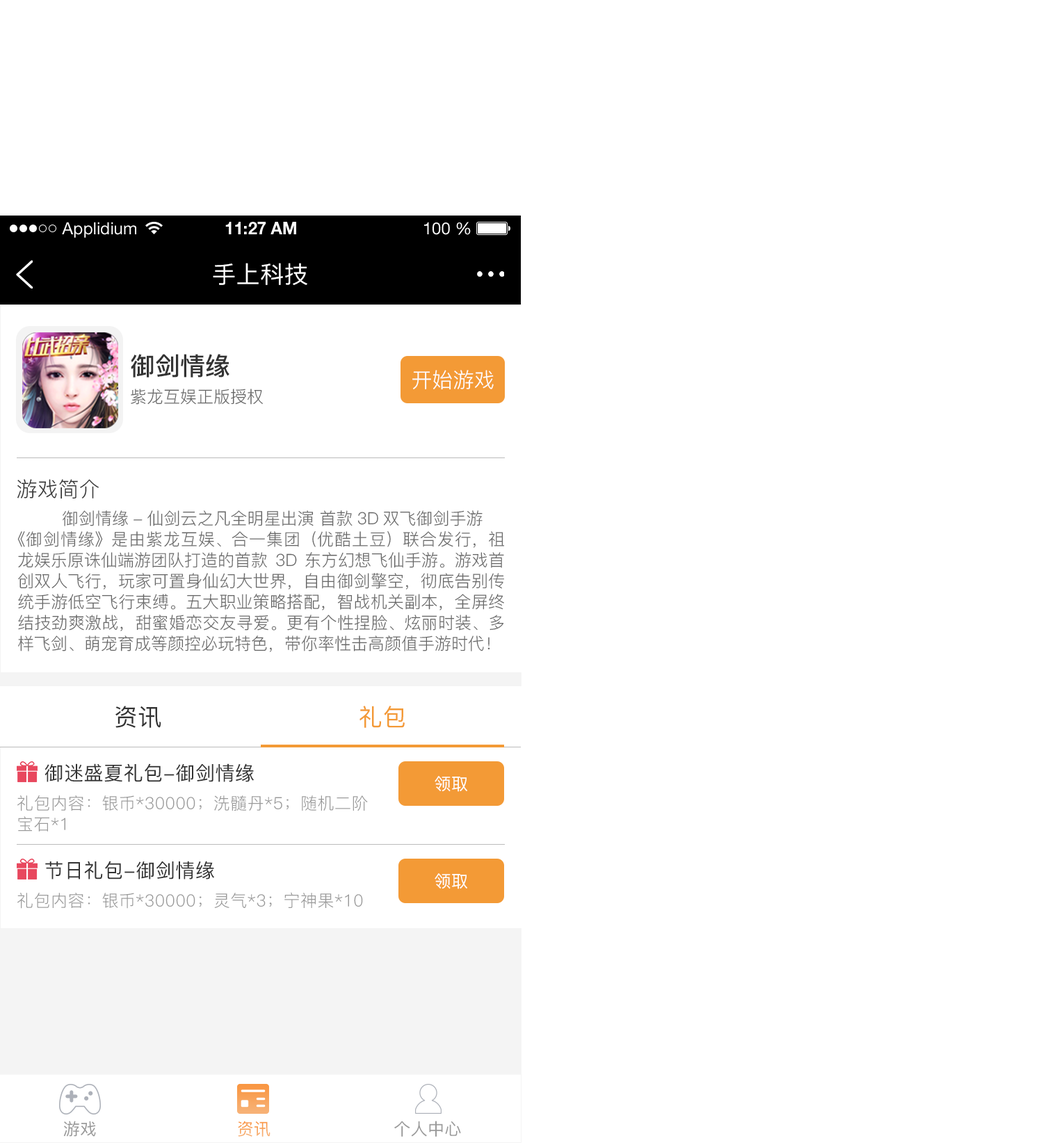
<style>
.page{position:relative;width:1043px;height:1143px;background:#ffffff}
.page>*{position:absolute;margin:0}
.t1{font:16.7px "HelveticaNeueLTStd-Roman";color:#ffffff}
.t2{font:16.7px "HelveticaNeueLTStd-Bd";color:#ffffff}
.t3{font:23.6px "PingFang-SC-Medium";letter-spacing:0.02em;color:#ffffff}
.t4{font:25px "PingFang-SC-Bold";color:#333333}
.t5{font:20.9px "PingFang-SC-Regular";color:#fefefe}
.t6{font:16.7px "PingFang-SC-Regular";color:#666666}
.t7{font:20.9px "PingFang-SC-Regular";color:#333333}
.t8{font:16.7px/20.9px "PingFang-SC-Regular";color:#666666}
.t9{font:23.6px "PingFang-SC-Medium";letter-spacing:0.02em;color:#333333}
.t10{font:23.6px "PingFang-SC-Medium";letter-spacing:0.02em;color:#f39a36}
.t11{font:19.5px "PingFang-SC-Medium";letter-spacing:0.02em;color:#333333}
.t12{font:16.7px "PingFang-SC-Medium";letter-spacing:0.02em;color:#fffefe}
.t13{font:16.7px/20.9px "PingFang-SC-Regular";letter-spacing:0.02em;color:#999999}
.t14{font:16.7px "PingFang-SC-Regular";letter-spacing:0.02em;color:#999999}
.t15{font:16.7px "PingFang-SC-Medium";letter-spacing:0.02em;color:#999999}
.t16{font:16.7px "PingFang-SC-Medium";letter-spacing:0.02em;color:#f8a45c}
</style>
<div class="page">
<p class="t1" style="left:62px;top:222px;width:74px;height:16px">Applidium</p>
<p class="t2" style="left:225px;top:222px;width:71px;height:12px">11:27 AM</p>
<p class="t1" style="left:424px;top:222px;width:47px;height:13px">100 %</p>
<p class="t3" style="left:213px;top:263px;width:94px;height:22px">手上科技</p>
<p class="t4" style="left:131px;top:354px;width:98px;height:24px">御剑情缘</p>
<p class="t5" style="left:412px;top:370px;width:82px;height:20px">开始游戏</p>
<p class="t6" style="left:131px;top:389px;width:132px;height:16px">紫龙互娱正版授权</p>
<p class="t7" style="left:17px;top:479px;width:82px;height:20px">游戏简介</p>
<p class="t8" style="left:17px;top:510px;width:487px;height:142px">御剑情缘-仙剑云之凡全明星出演 首款3D双飞御剑手游<br>《御剑情缘》是由紫龙互娱、合一集团（优酷土豆）联合发行，祖龙娱乐原诛仙端游团队打造的首款3D东方幻想飞仙手游。游戏首创双人飞行，玩家可置身仙幻大世界，自由御剑擎空，彻底告别传统手游低空飞行束缚。五大职业策略搭配，智战机关副本，全屏终结技劲爽激战，甜蜜婚恋交友寻爱。更有个性捏脸、炫丽时装、多样飞剑、萌宠育成等颜控必玩特色，带你率性击高颜值手游时代！</p>
<p class="t9" style="left:115px;top:706px;width:46px;height:22px">资讯</p>
<p class="t10" style="left:360px;top:706px;width:45px;height:22px">礼包</p>
<p class="t11" style="left:45px;top:764px;width:209px;height:18px">御迷盛夏礼包-御剑情缘</p>
<p class="t12" style="left:435px;top:776px;width:32px;height:16px">领取</p>
<p class="t13" style="left:17px;top:796px;width:351px;height:36px">礼包内容：银币*30000；洗髓丹*5；随机二阶宝石*1</p>
<p class="t11" style="left:45px;top:861px;width:169px;height:19px">节日礼包-御剑情缘</p>
<p class="t12" style="left:435px;top:873px;width:32px;height:16px">领取</p>
<p class="t14" style="left:17px;top:892px;width:346px;height:17px">礼包内容：银币*30000；灵气*3；宁神果*10</p>
<p class="t15" style="left:63px;top:1121px;width:33px;height:16px">游戏</p>
<p class="t16" style="left:238px;top:1121px;width:33px;height:16px">资讯</p>
<p class="t15" style="left:394px;top:1121px;width:67px;height:16px">个人中心</p>
</div>
